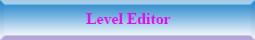
<style>
.page{position:relative;width:255px;height:40px}
.page>*{position:absolute;margin:0}
.t1{font:15.8px "TimesNewRomanPS-BoldMT";color:#d815ed}
</style>
<div class="page">
<p class="t1" style="left:86px;top:13px;width:85px;height:11px">Level Editor</p>
</div>
